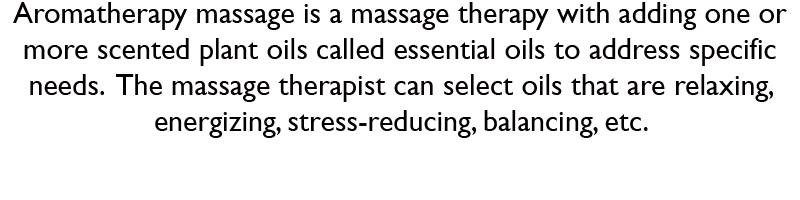
<style>
.page{position:relative;width:800px;height:200px;background:#ffffff}
.page>*{position:absolute;margin:0}
.t1{font:30px "GillSansMT";color:#050000}
</style>
<div class="page">
<p class="t1" style="left:13px;top:2px;width:774px;height:136px;text-align:center">Aromatherapy massage is a massage therapy with adding one or more scented plant oils called essential oils to address specific needs.  The massage therapist can select oils that are relaxing, energizing, stress-reducing, balancing, etc.</p>
</div>
